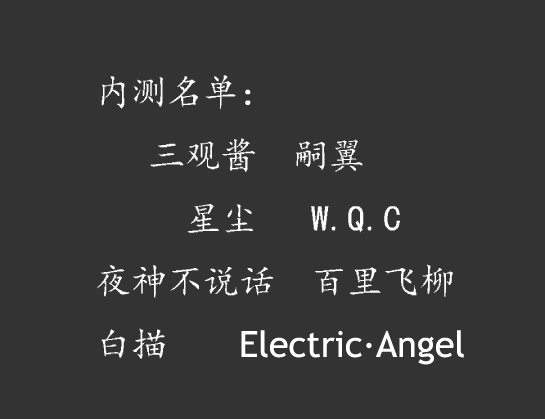
<style>
.page{position:relative;width:545px;height:419px;background:#333333}
.page>*{position:absolute;margin:0}
.t1{font:36px "¿¬Ìå";color:#ffffff}
.t2{font:36px "TrebuchetMS";color:#ffffff}
</style>
<div class="page">
<p class="t1" style="left:96px;top:75px;width:368px;height:290px">内测名单：<br>   三观酱  嗣翼<br>     星尘   W.Q.C<br>夜神不说话  百里飞柳<br>白描    <span class="t2">Electric·Angel</span></p>
</div>
